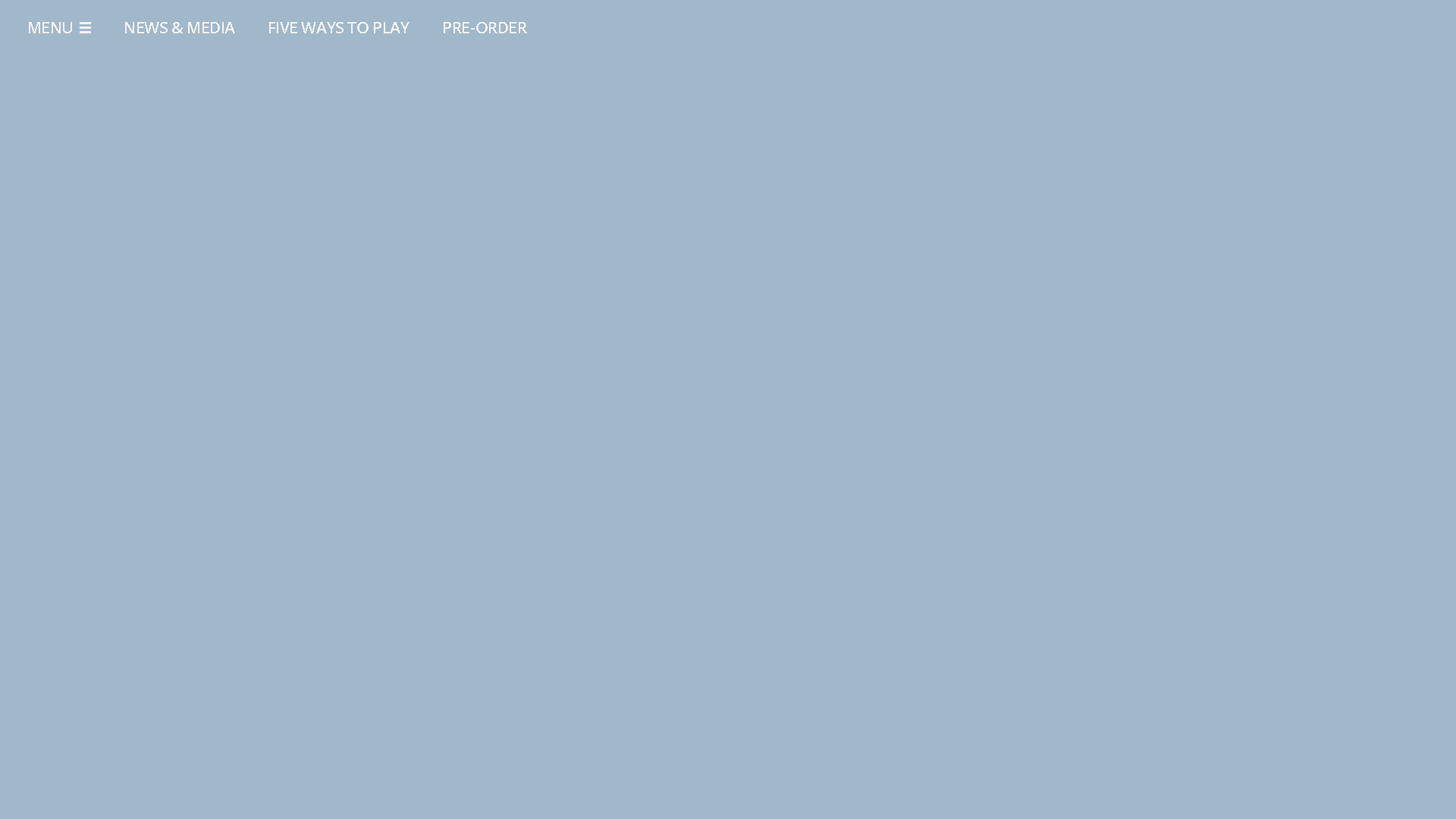
<style>
.page{position:relative;width:1456px;height:819px;background:#a1b8ca}
.page>*{position:absolute;margin:0}
.t1{font:15.9px "OpenSans-Semibold";letter-spacing:-0.02em;color:#f3f3f3}
</style>
<div class="page">
<p class="t1" style="left:29px;top:22px;width:43px;height:11px">MENU</p>
<p class="t1" style="left:125px;top:22px;width:110px;height:11px">NEWS &amp; MEDIA</p>
<p class="t1" style="left:269px;top:22px;width:140px;height:11px">FIVE WAYS TO PLAY</p>
<p class="t1" style="left:444px;top:22px;width:83px;height:11px">PRE-ORDER</p>
</div>
